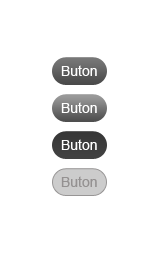
<style>
.page{position:relative;width:167px;height:276px;background:#ffffff}
.page>*{position:absolute;margin:0}
.t1{font:14px "ArialMT";color:#fefefe}
.t2{font:14px "ArialMT";color:#949191}
</style>
<div class="page">
<p class="t1" style="left:61px;top:65px;width:36px;height:11px">Buton</p>
<p class="t1" style="left:61px;top:102px;width:36px;height:11px">Buton</p>
<p class="t1" style="left:61px;top:139px;width:36px;height:11px">Buton</p>
<p class="t2" style="left:61px;top:176px;width:36px;height:11px">Buton</p>
</div>
